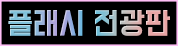
<style>
.page{position:relative;width:178px;height:46px;background:#000000}
.page>*{position:absolute;margin:0}
.t1{font:26.8px "BMDoHyeon"}
</style>
<div class="page">
<p class="t1" style="left:8px;top:10px;width:162px;height:26px">플래시 전광판</p>
</div>
